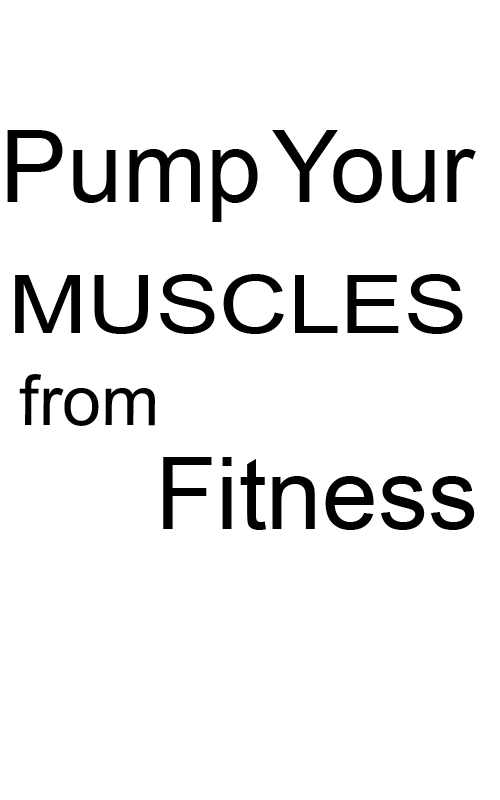
<style>
.page{position:relative;width:500px;height:800px;background:#ffffff}
.page>*{position:absolute;margin:0}
.t1{font:100px "ArialMT";color:#000000}
.t2{font:80px "ArialMT";color:#000000;scale:1.19 1}
.t3{font:70px "ArialMT";color:#000000}
</style>
<div class="page">
<p class="t1" style="left:7px;top:130px;width:251px;height:92px">Pump</p>
<p class="t1" style="left:272px;top:130px;width:204px;height:73px">Your</p>
<p class="t2" style="left:15px;top:274px;width:448px;height:60px">MUSCLES</p>
<p class="t3" style="left:19px;top:374px;width:136px;height:52px">from</p>
<p class="t1" style="left:163px;top:457px;width:312px;height:73px">Fitness</p>
</div>
